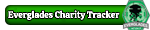
<style>
.page{position:relative;width:150px;height:30px;background:#ffffff}
.page>*{position:absolute;margin:0}
.t1{font:9px "Calistoga-Regular";color:#ffffff}
</style>
<div class="page">
<p class="t1" style="left:8px;top:10px;width:112px;height:10px">Everglades Charity Tracker</p>
</div>
